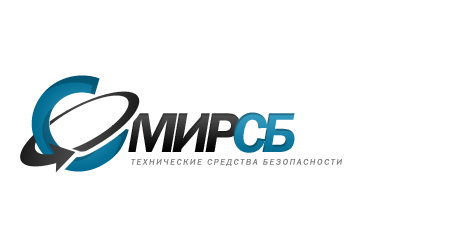
<style>
.page{position:relative;width:450px;height:250px;background:#ffffff}
.page>*{position:absolute;margin:0}
.t1{font:125px "CenturyGothic-Bold";text-transform:uppercase}
.t2{font:58.3px "FranklinGothic-DemiItalic";letter-spacing:-0.1em}
.t3{font:8.3px "FranklinGothicBookC-Italic";letter-spacing:0.2em;color:#7f7f7f;text-transform:uppercase}
</style>
<div class="page">
<p class="t1" style="left:31px;top:75px;width:98px;height:97px;rotate:-30deg">с</p>
<p class="t2" style="left:128px;top:113px;width:112px;height:39px">МИР</p>
<p class="t2" style="left:233px;top:112px;width:62px;height:41px">CБ</p>
<p class="t3" style="left:131px;top:158px;width:211px;height:8px">ТЕХНИЧЕСКИЕ СРЕДСТВА БЕЗОПАСНОСТИ</p>
</div>
